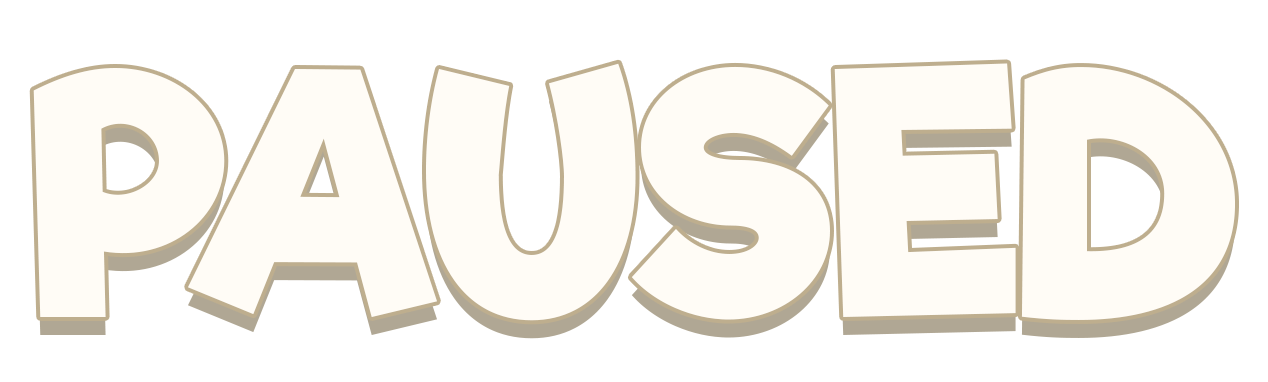
<style>
.page{position:relative;width:1268px;height:382px;background:#ffffff}
.page>*{position:absolute;margin:0}
.t1{font:326.2px "Riffic-Bold";color:#fffcf6}
</style>
<div class="page">
<p class="t1" style="left:33px;top:63px;width:1202px;height:258px">PAUSED</p>
</div>
